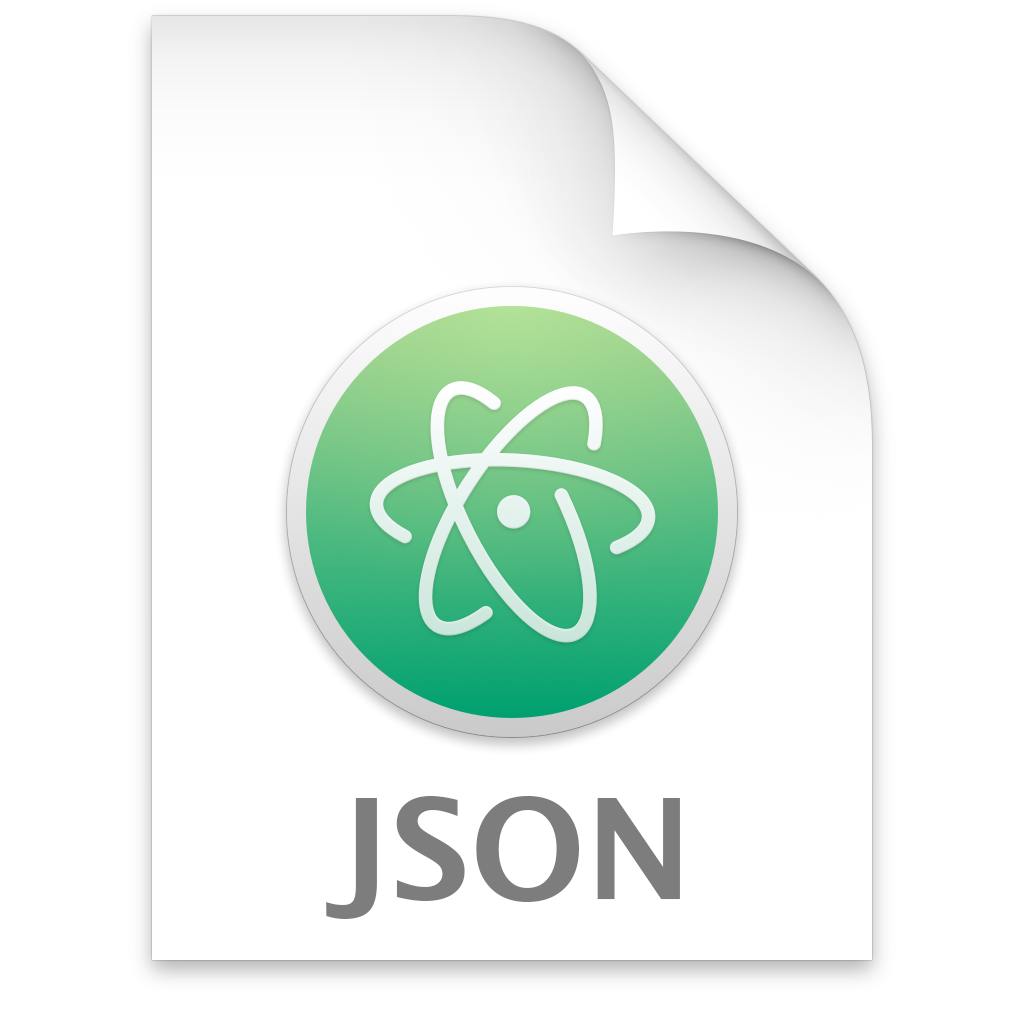
<style>
.page{position:relative;width:1024px;height:1024px;background:#ffffff}
.page>*{position:absolute;margin:0}
.t1{font:140px "LucidaGrande-Bold";color:#7d7d7d}
</style>
<div class="page">
<p class="t1" style="left:326px;top:796px;width:354px;height:123px">JSON</p>
</div>
